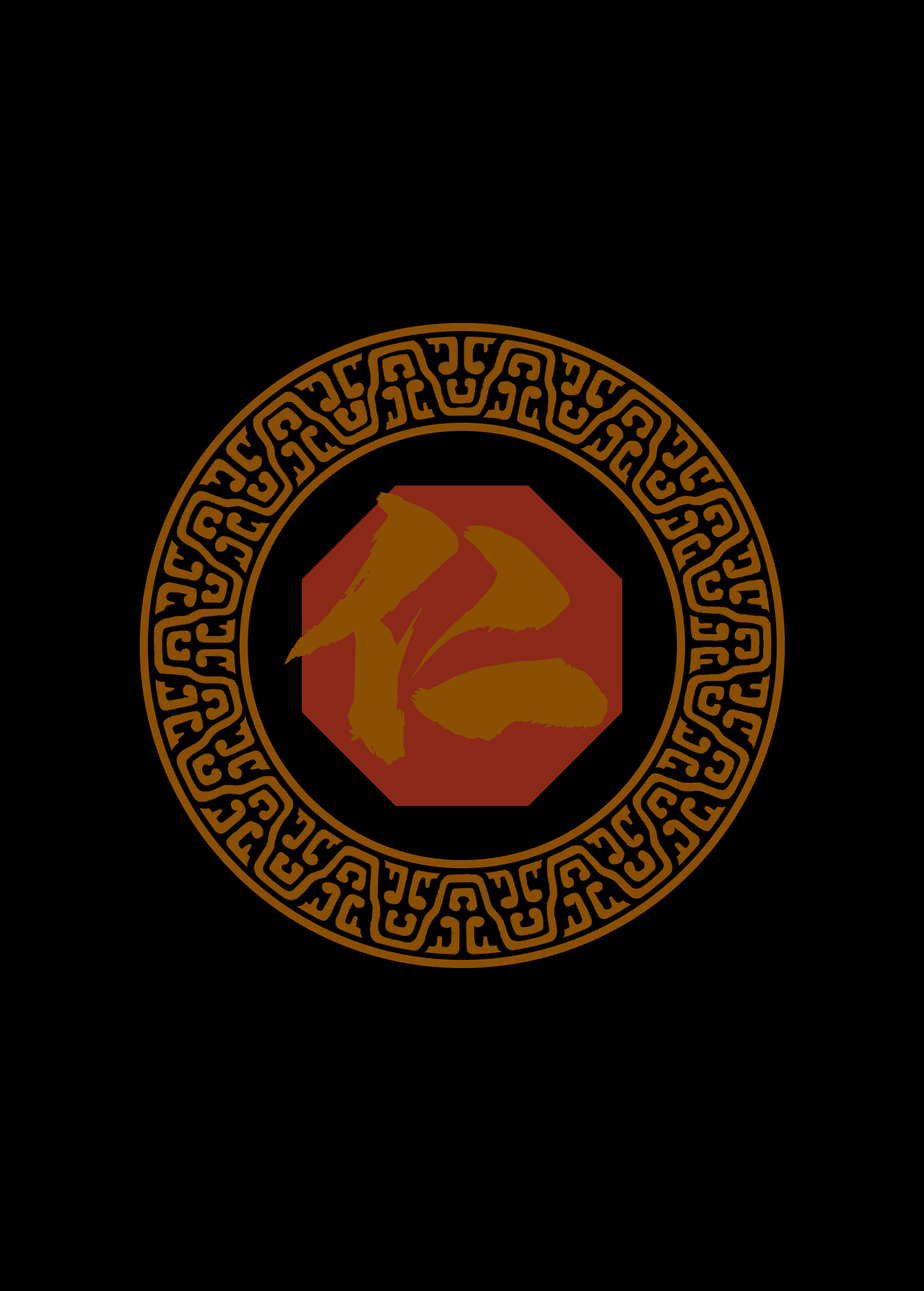
<style>
.page{position:relative;width:924px;height:1291px;background:#000000}
.page>*{position:absolute;margin:0}
.t1{font:361.5px "55--Regular";letter-spacing:0.2em;color:#8b4f03}
</style>
<div class="page">
<p class="t1" style="left:283px;top:492px;width:325px;height:273px">仁</p>
</div>
